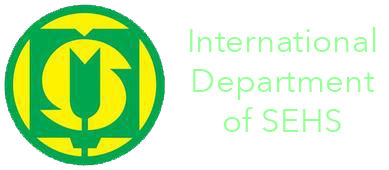
<style>
.page{position:relative;width:389px;height:170px;background:#ffffff}
.page>*{position:absolute;margin:0}
.t1{font:33.3px "AvenirNext-Regular";color:#99ff99}
</style>
<div class="page">
<p class="t1" style="left:190px;top:27px;width:186px;height:105px;text-align:center">International Department of SEHS</p>
</div>
